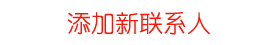
<style>
.page{position:relative;width:280px;height:45px;background:#ffffff}
.page>*{position:absolute;margin:0}
.t1{font:24px "YouYuan";color:#f4190a}
</style>
<div class="page">
<p class="t1" style="left:67px;top:11px;width:143px;height:24px">添加新联系人</p>
</div>
